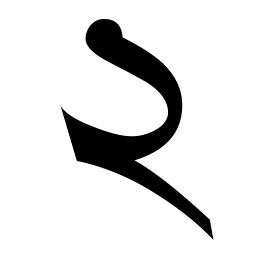
<style>
.page{position:relative;width:277px;height:258px;background:#ffffff}
.page>*{position:absolute;margin:0}
.t1{font:300px "KalpurushANSI";color:#000000}
</style>
<div class="page">
<p class="t1" style="left:60px;top:19px;width:154px;height:221px">2</p>
</div>
